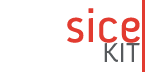
<style>
.page{position:relative;width:165px;height:72px;background:#ffffff}
.page>*{position:absolute;margin:0}
.t1{font:48px "Anivers-Regular";color:#e23b30}
.t2{font:28px "Anivers-Regular";color:#575a5d}
</style>
<div class="page">
<p class="t1" style="left:67px;top:8px;width:73px;height:35px">sice</p>
<p class="t2" style="left:104px;top:43px;width:36px;height:19px">KIT</p>
</div>
